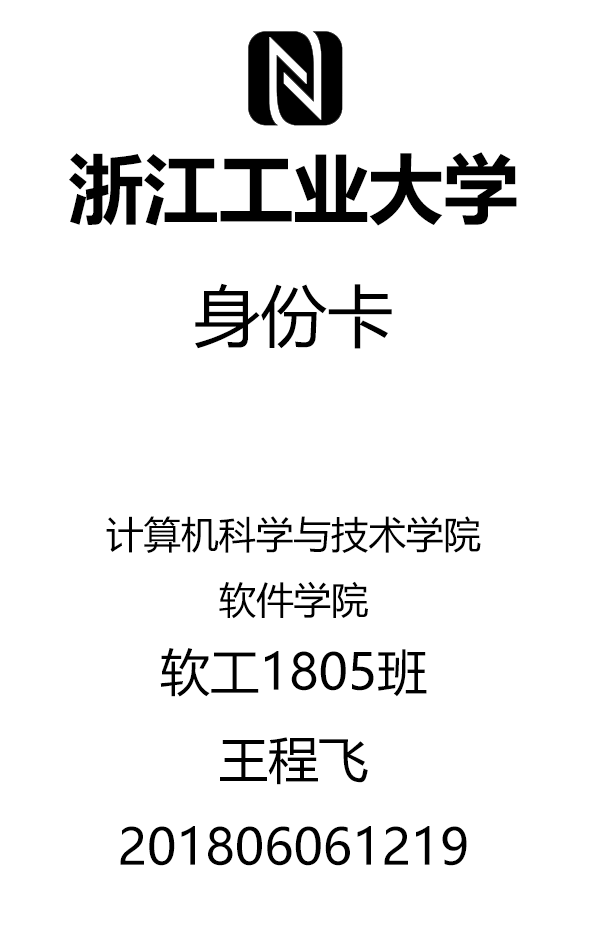
<style>
.page{position:relative;width:591px;height:945px;background:#ffffff}
.page>*{position:absolute;margin:0}
.t1{font:50px "MicrosoftYaHei";color:#000000}
.t2{font:75px "MicrosoftYaHei-Bold";color:#000000}
.t3{font:66.7px "MicrosoftYaHei";color:#000000}
.t4{font:37.5px "MicrosoftYaHei";color:#000000}
</style>
<div class="page">
<p class="t1" style="left:69px;top:152px;width:448px;height:714px;text-align:center"><span class="t2">浙江工业大学<br></span><span class="t3">身份卡<br><br></span><span class="t4">计算机科学与技术学院<br>软件学院<br></span>软工1805班<br>王程飞<br>201806061219</p>
</div>
